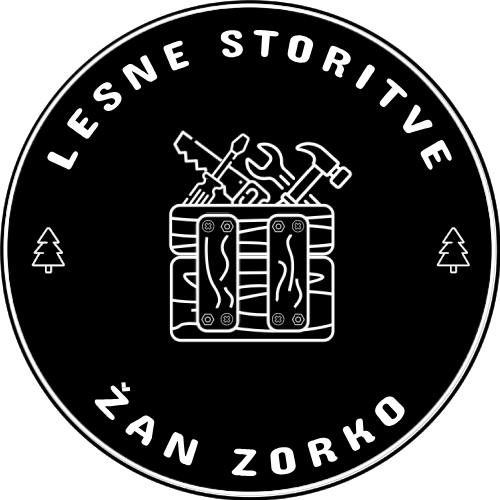
<style>
.page{position:relative;width:500px;height:500px;background:#000000}
.page>*{position:absolute;margin:0}
.t1{font:38.9px "Dangrek-Regular";letter-spacing:0.196em;color:#ffffff}
</style>
<div class="page">
<p class="t1" style="left:47px;top:29px;width:405px;height:141px;rotate:1deg">LESNE STORITVE</p>
<p class="t1" style="left:94px;top:385px;width:311px;height:92px;rotate:-4deg">ZAN ZORKO</p>
</div>
